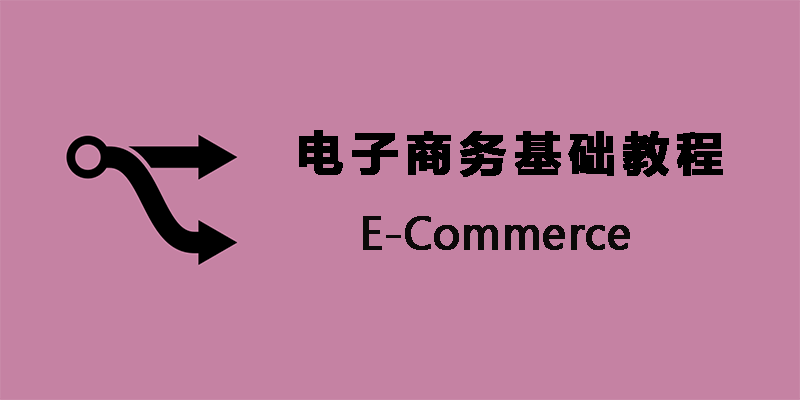
<style>
.page{position:relative;width:800px;height:400px;background:#c582a3}
.page>*{position:absolute;margin:0}
.t1{font:45.7px "MicrosoftYaHei-Bold";letter-spacing:0.16em;color:#000000;font-weight:bold}
.t2{font:45.7px "MicrosoftNewTaiLue";color:#0c0909;font-weight:bold}
</style>
<div class="page">
<p class="t1" style="left:299px;top:130px;width:424px;height:47px">电子商务基础教程</p>
<p class="t2" style="left:363px;top:216px;width:267px;height:34px">E-Commerce</p>
</div>
